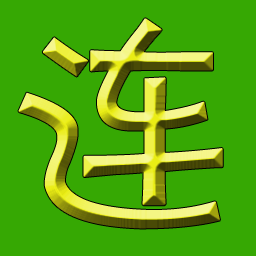
<style>
.page{position:relative;width:256px;height:256px;background:#36a803}
.page>*{position:absolute;margin:0}
.t1{font:247.7px "Jkaton";font-weight:bold}
</style>
<div class="page">
<p class="t1" style="left:18px;top:18px;width:205px;height:211px">连</p>
</div>
